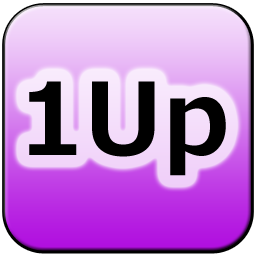
<style>
.page{position:relative;width:256px;height:256px}
.page>*{position:absolute;margin:0}
.t1{font:100px "Meiryo-Bold";color:#000000}
</style>
<div class="page">
<p class="t1" style="left:29px;top:81px;width:197px;height:95px">1Up</p>
</div>
